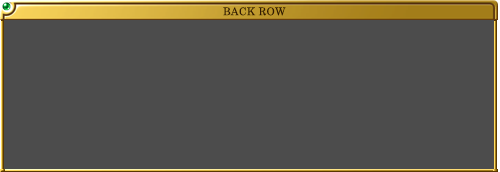
<style>
.page{position:relative;width:500px;height:172px;background:#4c4c4c}
.page>*{position:absolute;margin:0}
.t1{font:10.7px "CenturySchoolbook";letter-spacing:0.025em;color:#321a02}
</style>
<div class="page">
<p class="t1" style="left:223px;top:7px;width:63px;height:9px">BACK ROW</p>
</div>
